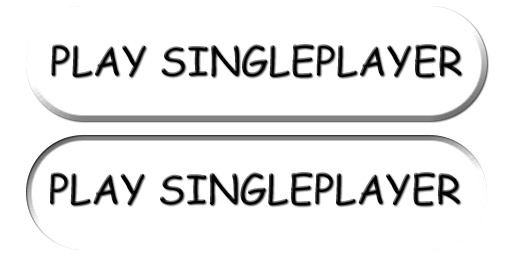
<style>
.page{position:relative;width:512px;height:256px;background:#ffffff}
.page>*{position:absolute;margin:0}
.t1{font:40px "ComicSansMS";color:#000000}
.t2{font:40.3px "ComicSansMS";color:#000000}
</style>
<div class="page">
<p class="t1" style="left:51px;top:44px;width:411px;height:34px">PLAY SINGLEPLAYER</p>
<p class="t2" style="left:50px;top:172px;width:410px;height:34px">PLAY SINGLEPLAYER</p>
</div>
